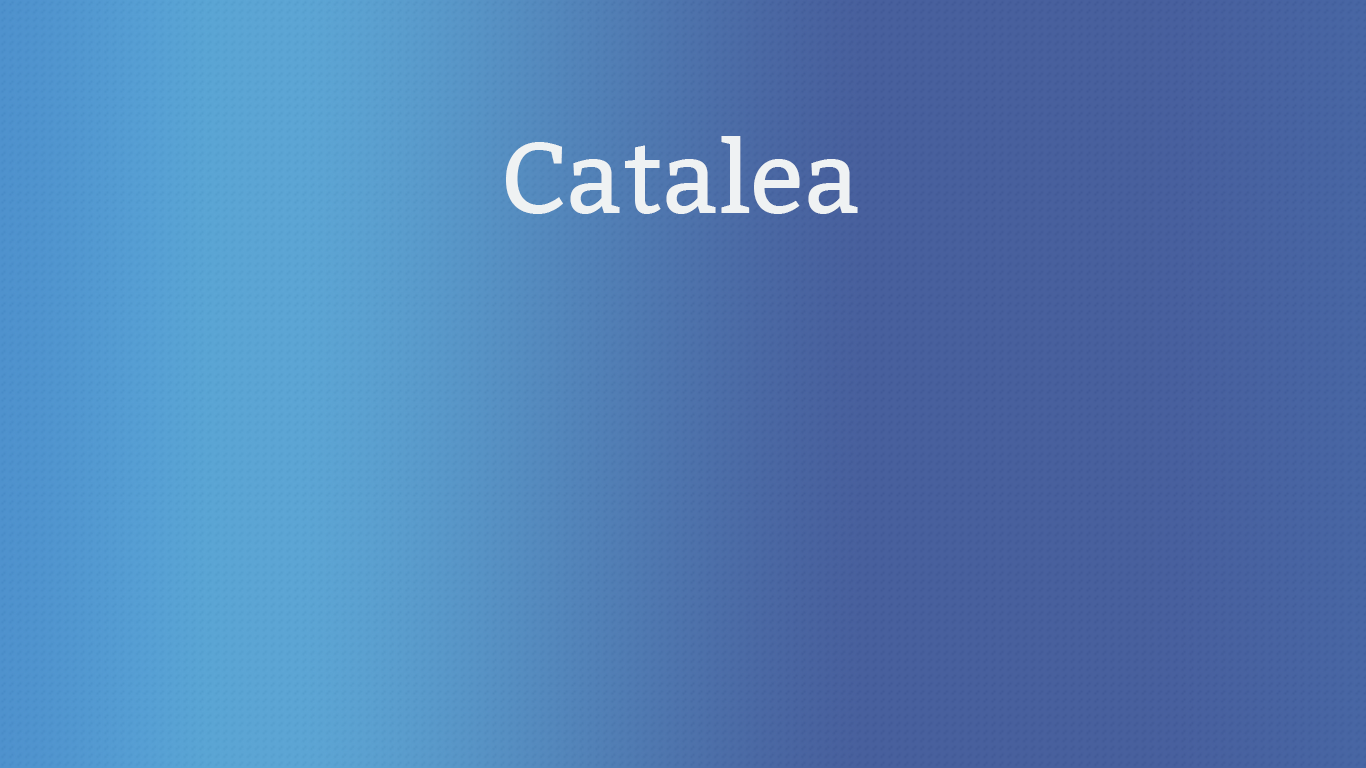
<style>
.page{position:relative;width:1366px;height:768px}
.page>*{position:absolute;margin:0}
.t1{font:100px "Kadwa-Regular";color:#eff2f3}
</style>
<div class="page">
<p class="t1" style="left:506px;top:136px;width:352px;height:78px">Catalea</p>
</div>
